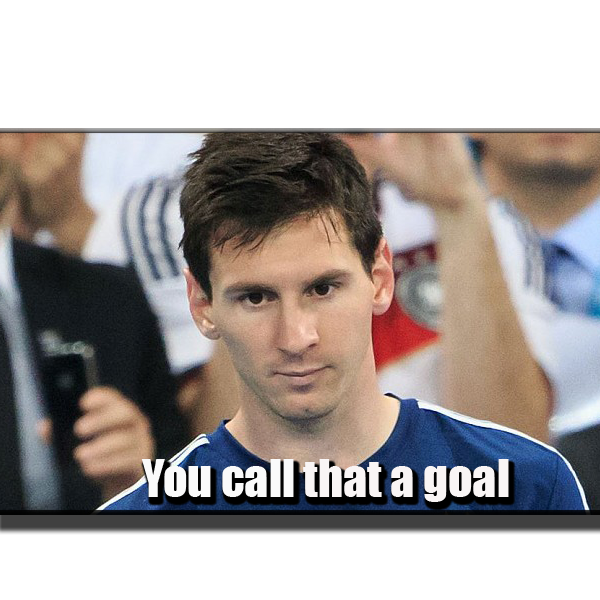
<style>
.page{position:relative;width:600px;height:600px;background:#ffffff}
.page>*{position:absolute;margin:0}
.t1{font:48px "Impact";color:#f9f5f5}
.t2{font:48px "Impact";color:#fafafa}
</style>
<div class="page">
<p class="t1" style="left:141px;top:459px;width:368px;height:43px"><span class="t2">You call </span>that a goal</p>
</div>
